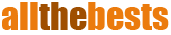
<style>
.page{position:relative;width:171px;height:35px;background:#ffffff}
.page>*{position:absolute;margin:0}
.t1{font:36px "Impact";color:#eb7b0d}
.t2{font:36px "Impact";color:#9f4f01}
</style>
<div class="page">
<p class="t1" style="left:2px;top:2px;width:167px;height:28px">all<span class="t2">the</span>bests</p>
</div>
